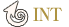
<style>
.page{position:relative;width:69px;height:27px;background:#ffffff}
.page>*{position:absolute;margin:0}
.t1{font:18px "RyuminPro-ExBold";letter-spacing:-0.08em;color:#ae9442;scale:0.9 1}
</style>
<div class="page">
<p class="t1" style="left:33px;top:7px;width:29px;height:14px">INT</p>
</div>
